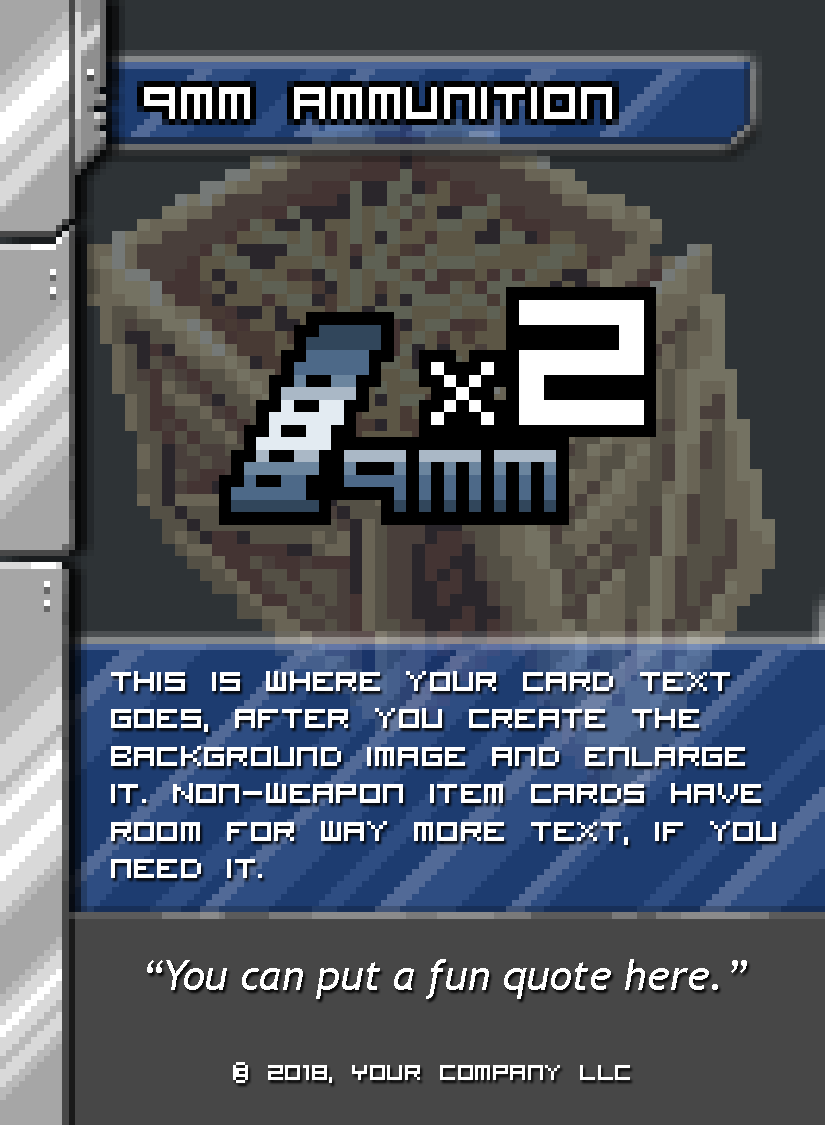
<style>
.page{position:relative;width:825px;height:1125px}
.page>*{position:absolute;margin:0}
.t1{font:50px/37.5px "VisitorTT2BRK";color:#ffffff}
.t2{font:41.7px "TrebuchetMS-Italic";color:#ffffff}
.t3{font:37.5px "VisitorTT2BRK";color:#ffffff}
</style>
<div class="page">
<p class="t1" style="left:111px;top:671px;width:665px;height:207px">This is where your card text<br>goes, after you create the<br>background image and enlarge<br>it. Non-weapon item cards have<br>room for way more text, if you<br>need it.</p>
<p class="t2" style="left:147px;top:959px;width:600px;height:40px">“You can put a fun quote here.”</p>
<p class="t3" style="left:233px;top:1062px;width:397px;height:21px">© 2018, Your Company LLC</p>
</div>
